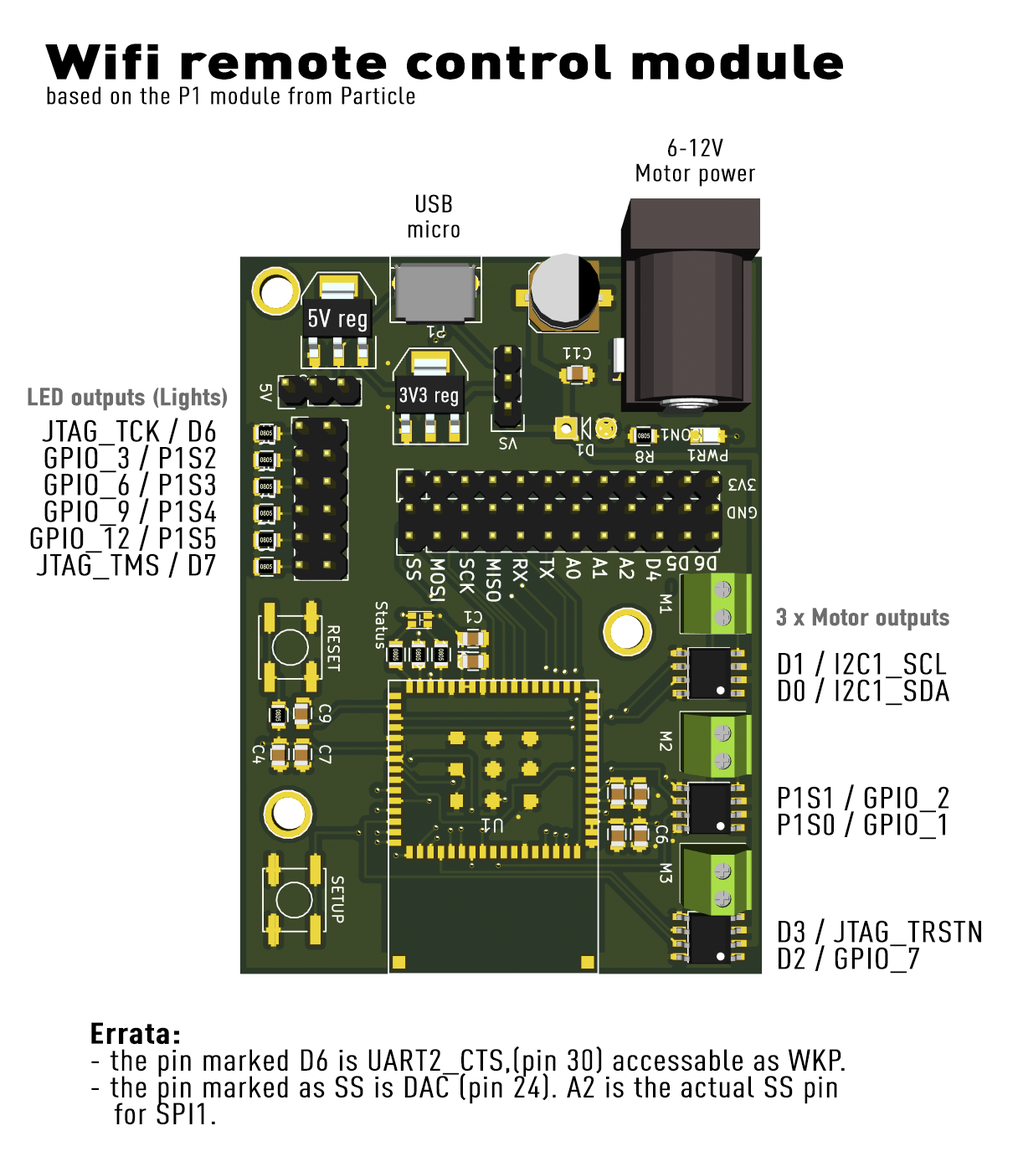
<style>
.page{position:relative;width:1018px;height:1172px;background:#ffffff}
.page>*{position:absolute;margin:0}
.t1{font:24.1px/25.1px "DINCond-Regular";color:#000000;font-weight:bold;scale:1.25 1}
.t2{font:48.2px/25.1px "DIN-Black";color:#000000;font-weight:bold;scale:1.25 1}
.t3{font:24.1px "DINCond-Regular";color:#ffffff;font-weight:bold;scale:1.25 1}
.t4{font:24.1px "DINCondensed-Bold";color:#6d6d6d;font-weight:bold;scale:1.25 1}
.t5{font:20.1px "DINCond-Regular";color:#ffffff;font-weight:bold;scale:1.25 1}
.t6{font:29.5px/26.8px "DINCond-Regular";color:#000000;font-weight:bold;scale:1.25 1}
.t7{font:29.5px/26.8px "DINCond-Bold";color:#000000;font-weight:bold;scale:1.25 1}
</style>
<div class="page">
<p class="t1" style="left:45px;top:44px;width:798px;height:61px"><span class="t2">Wifi remote control module<br></span>based on the P1 module from Particle</p>
<p class="t1" style="left:636px;top:138px;width:119px;height:49px;text-align:center">6-12V<br>Motor power</p>
<p class="t1" style="left:408px;top:194px;width:51px;height:44px;text-align:center">USB<br>micro</p>
<p class="t3" style="left:309px;top:309px;width:58px;height:23px">5V reg</p>
<p class="t4" style="left:28px;top:387px;width:200px;height:24px">LED outputs (Lights)</p>
<p class="t5" style="left:399px;top:387px;width:59px;height:20px">3V3 reg</p>
<p class="t6" style="left:30px;top:418px;width:186px;height:162px;text-align:right">JTAG_TCK / D6<br>GPIO_3 / P1S2<br>GPIO_6 / P1S3<br>GPIO_9 / P1S4<br>GPIO_12 / P1S5<br>JTAG_TMS / D7</p>
<p class="t4" style="left:776px;top:608px;width:173px;height:23px">3 x Motor outputs</p>
<p class="t6" style="left:778px;top:650px;width:203px;height:323px">D1 / I2C1_SCL<br>D0 / I2C1_SDA<br><br><br><br>P1S1 / GPIO_2<br>P1S0 / GPIO_1<br><br><br><br>D3 / JTAG_TRSTN<br>D2 / GPIO_7</p>
<p class="t6" style="left:91px;top:1022px;width:753px;height:103px"><span class="t7">Errata:<br></span>- the pin marked D6 is UART2_CTS,(pin 30) accessable as WKP.<br>- the pin marked as SS is DAC (pin 24). A2 is the actual SS pin<br>   for SPI1.</p>
</div>
